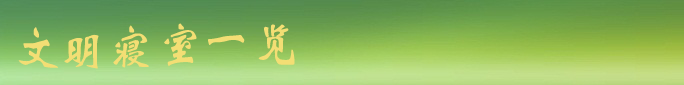
<style>
.page{position:relative;width:684px;height:85px}
.page>*{position:absolute;margin:0}
.t1{font:48px "STXinwei";color:#f3de74}
</style>
<div class="page">
<p class="t1" style="left:18px;top:23px;width:277px;height:46px">文明寝室一览</p>
</div>
